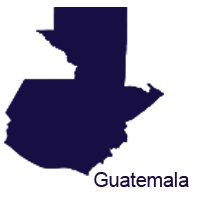
<style>
.page{position:relative;width:200px;height:200px;background:#ffffff}
.page>*{position:absolute;margin:0}
.t1{font:20.8px "ArialMT";color:#170f44;scale:0.94 1}
</style>
<div class="page">
<p class="t1" style="left:94px;top:172px;width:95px;height:15px">Guatemala</p>
</div>
